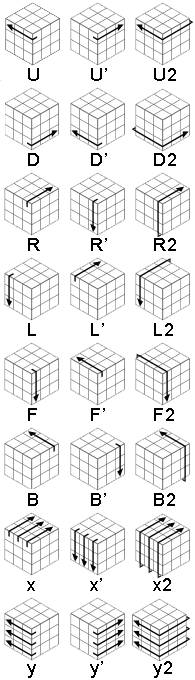
<style>
.page{position:relative;width:195px;height:680px;background:#ffffff}
.page>*{position:absolute;margin:0}
.t1{font:18px "ArialMT";letter-spacing:0.075em;color:#000000}
</style>
<div class="page">
<p class="t1" style="left:28px;top:68px;width:11px;height:13px">U</p>
<p class="t1" style="left:91px;top:68px;width:16px;height:13px">U’</p>
<p class="t1" style="left:154px;top:68px;width:22px;height:13px">U2</p>
<p class="t1" style="left:28px;top:153px;width:11px;height:13px">D</p>
<p class="t1" style="left:91px;top:153px;width:16px;height:13px">D’</p>
<p class="t1" style="left:154px;top:153px;width:22px;height:13px">D2</p>
<p class="t1" style="left:28px;top:238px;width:12px;height:13px">R</p>
<p class="t1" style="left:91px;top:238px;width:16px;height:13px">R’</p>
<p class="t1" style="left:154px;top:238px;width:22px;height:13px">R2</p>
<p class="t1" style="left:28px;top:323px;width:8px;height:13px">L</p>
<p class="t1" style="left:91px;top:323px;width:13px;height:13px">L’</p>
<p class="t1" style="left:154px;top:323px;width:19px;height:13px">L2</p>
<p class="t1" style="left:28px;top:408px;width:9px;height:13px">F</p>
<p class="t1" style="left:91px;top:408px;width:14px;height:13px">F’</p>
<p class="t1" style="left:154px;top:408px;width:20px;height:13px">F2</p>
<p class="t1" style="left:28px;top:493px;width:10px;height:13px">B</p>
<p class="t1" style="left:91px;top:493px;width:15px;height:13px">B’</p>
<p class="t1" style="left:154px;top:493px;width:21px;height:13px">B2</p>
<p class="t1" style="left:27px;top:581px;width:8px;height:10px">x</p>
<p class="t1" style="left:90px;top:578px;width:12px;height:13px">x’</p>
<p class="t1" style="left:153px;top:578px;width:18px;height:13px">x2</p>
<p class="t1" style="left:27px;top:664px;width:9px;height:14px">y</p>
<p class="t1" style="left:90px;top:661px;width:13px;height:17px">y’</p>
<p class="t1" style="left:153px;top:661px;width:19px;height:17px">y2</p>
</div>
